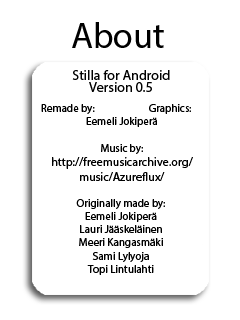
<style>
.page{position:relative;width:240px;height:320px;background:#ffffff}
.page>*{position:absolute;margin:0}
.t1{font:36px "MyriadPro-Regular";color:#000000}
.t2{font:14px/12px "MyriadPro-Regular";color:#000000}
.t3{font:11px "MyriadPro-Regular";color:#000000}
.t4{font:12px "MyriadPro-Regular";color:#000000}
</style>
<div class="page">
<p class="t1" style="left:72px;top:22px;width:92px;height:26px">About</p>
<p class="t2" style="left:72px;top:70px;width:98px;height:22px;text-align:center">Stilla for Android<br>Version 0.5</p>
<p class="t3" style="left:41px;top:104px;width:152px;height:77px">Remade by:  Graphics:<br>Eemeli Jokiperä<br><br>Music by:<br><span class="t4">http://freemusicarchive.org/<br>music/Azureflux/</span></p>
<p class="t3" style="left:76px;top:199px;width:89px;height:76px;text-align:center">Originally made by:<br>Eemeli Jokiperä <br>Lauri Jääskeläinen<br>Meeri Kangasmäki<br>Sami Lylyoja<br>Topi Lintulahti</p>
</div>
